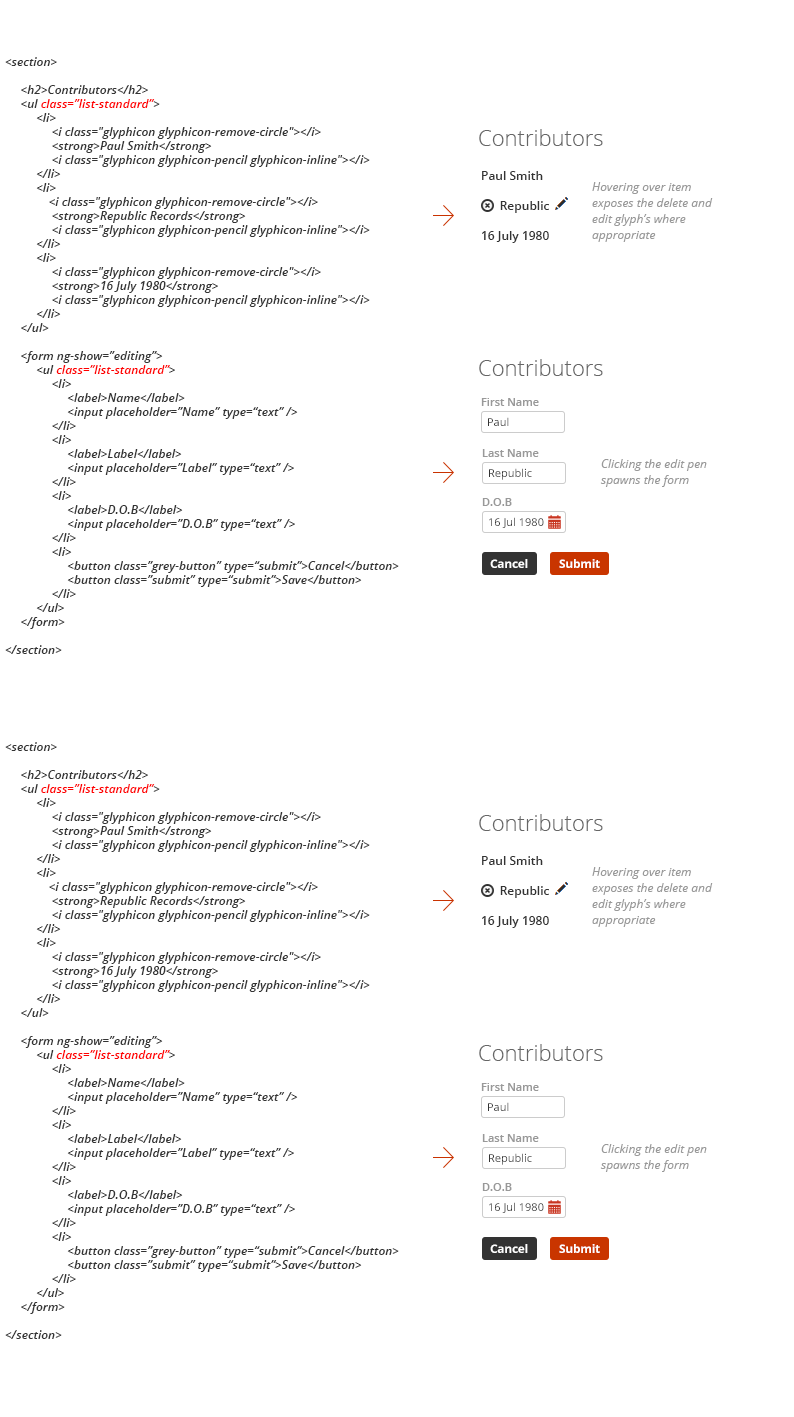
<style>
.page{position:relative;width:794px;height:1417px;background:#ffffff}
.page>*{position:absolute;margin:0}
.t1{font:12px/14px "OpenSans-SemiboldItalic";color:#333333}
.t2{font:12px/14px "OpenSans-SemiboldItalic";color:#ff0000}
.t3{font:22px "OpenSans-Light";color:#666666}
.t4{font:12px/10px "OpenSans-Semibold";color:#333333}
.t5{font:12px/16px "OpenSans-Italic";color:#999999}
.t6{font:11px "OpenSans-Semibold";color:#999999}
.t7{font:11px "OpenSans";color:#333333}
.t8{font:12px "OpenSans-Bold";letter-spacing:-0.025em;color:#ffffff}
</style>
<div class="page">
<p class="t1" style="left:5px;top:57px;width:394px;height:597px">&lt;section&gt;<br><br>     &lt;h2&gt;Contributors&lt;/h2&gt;<br>     &lt;ul <span class="t2">class=”list-standard”</span>&gt;<br>          &lt;li&gt;<br>               &lt;i class="glyphicon glyphicon-remove-circle"&gt;&lt;/i&gt;<br>               &lt;strong&gt;Paul Smith&lt;/strong&gt;<br>               &lt;i class="glyphicon glyphicon-pencil glyphicon-inline"&gt;&lt;/i&gt;<br>          &lt;/li&gt;<br>          &lt;li&gt;<br>              &lt;i class="glyphicon glyphicon-remove-circle"&gt;&lt;/i&gt;<br>               &lt;strong&gt;Republic Records&lt;/strong&gt;<br>               &lt;i class="glyphicon glyphicon-pencil glyphicon-inline"&gt;&lt;/i&gt;<br>          &lt;/li&gt;<br>          &lt;li&gt;<br>               &lt;i class="glyphicon glyphicon-remove-circle"&gt;&lt;/i&gt;<br>               &lt;strong&gt;16 July 1980&lt;/strong&gt;<br>               &lt;i class="glyphicon glyphicon-pencil glyphicon-inline"&gt;&lt;/i&gt;<br>          &lt;/li&gt;<br>     &lt;/ul&gt;<br><br>     &lt;form ng-show=”editing”&gt;<br>          &lt;ul <span class="t2">class=”list-standard”</span>&gt;<br>               &lt;li&gt;<br>                    &lt;label&gt;Name&lt;/label&gt;<br>                    &lt;input placeholder=”Name” type=“text” /&gt;<br>               &lt;/li&gt;<br>               &lt;li&gt;<br>                    &lt;label&gt;Label&lt;/label&gt;<br>                    &lt;input placeholder=”Label” type=“text” /&gt;<br>               &lt;/li&gt;<br>               &lt;li&gt;<br>                    &lt;label&gt;D.O.B&lt;/label&gt;<br>                    &lt;input placeholder=”D.O.B” type=“text” /&gt;<br>               &lt;/li&gt;<br>               &lt;li&gt;<br>                    &lt;button class=”grey-button” type=“submit”&gt;Cancel&lt;/button&gt;<br>                    &lt;button class=”submit” type=“submit”&gt;Save&lt;/button&gt;<br>               &lt;/li&gt;<br>          &lt;/ul&gt;<br>     &lt;/form&gt;<br><br>&lt;/section&gt;</p>
<p class="t3" style="left:479px;top:129px;width:124px;height:17px">Contributors</p>
<p class="t4" style="left:482px;top:171px;width:67px;height:72px">Paul Smith<br><br><br>      Republic<br><br><br>16 July 1980</p>
<p class="t5" style="left:592px;top:182px;width:121px;height:60px">Hovering over item<br>exposes the delete and <br>edit glyph’s where<br>appropriate</p>
<p class="t3" style="left:479px;top:359px;width:124px;height:17px">Contributors</p>
<p class="t6" style="left:481px;top:398px;width:58px;height:8px">First Name</p>
<p class="t7" style="left:488px;top:417px;width:21px;height:9px">Paul</p>
<p class="t6" style="left:482px;top:449px;width:57px;height:8px">Last Name</p>
<p class="t5" style="left:600px;top:459px;width:107px;height:28px">Clicking the edit pen <br>spawns the form</p>
<p class="t7" style="left:489px;top:468px;width:43px;height:12px">Republic</p>
<p class="t6" style="left:482px;top:498px;width:30px;height:8px">D.O.B</p>
<p class="t7" style="left:489px;top:517px;width:55px;height:11px">16 Jul 1980</p>
<p class="t8" style="left:490px;top:559px;width:38px;height:9px">Cancel</p>
<p class="t8" style="left:559px;top:559px;width:41px;height:9px">Submit</p>
<p class="t1" style="left:5px;top:742px;width:394px;height:597px">&lt;section&gt;<br><br>     &lt;h2&gt;Contributors&lt;/h2&gt;<br>     &lt;ul <span class="t2">class=”list-standard”</span>&gt;<br>          &lt;li&gt;<br>               &lt;i class="glyphicon glyphicon-remove-circle"&gt;&lt;/i&gt;<br>               &lt;strong&gt;Paul Smith&lt;/strong&gt;<br>               &lt;i class="glyphicon glyphicon-pencil glyphicon-inline"&gt;&lt;/i&gt;<br>          &lt;/li&gt;<br>          &lt;li&gt;<br>              &lt;i class="glyphicon glyphicon-remove-circle"&gt;&lt;/i&gt;<br>               &lt;strong&gt;Republic Records&lt;/strong&gt;<br>               &lt;i class="glyphicon glyphicon-pencil glyphicon-inline"&gt;&lt;/i&gt;<br>          &lt;/li&gt;<br>          &lt;li&gt;<br>               &lt;i class="glyphicon glyphicon-remove-circle"&gt;&lt;/i&gt;<br>               &lt;strong&gt;16 July 1980&lt;/strong&gt;<br>               &lt;i class="glyphicon glyphicon-pencil glyphicon-inline"&gt;&lt;/i&gt;<br>          &lt;/li&gt;<br>     &lt;/ul&gt;<br><br>     &lt;form ng-show=”editing”&gt;<br>          &lt;ul <span class="t2">class=”list-standard”</span>&gt;<br>               &lt;li&gt;<br>                    &lt;label&gt;Name&lt;/label&gt;<br>                    &lt;input placeholder=”Name” type=“text” /&gt;<br>               &lt;/li&gt;<br>               &lt;li&gt;<br>                    &lt;label&gt;Label&lt;/label&gt;<br>                    &lt;input placeholder=”Label” type=“text” /&gt;<br>               &lt;/li&gt;<br>               &lt;li&gt;<br>                    &lt;label&gt;D.O.B&lt;/label&gt;<br>                    &lt;input placeholder=”D.O.B” type=“text” /&gt;<br>               &lt;/li&gt;<br>               &lt;li&gt;<br>                    &lt;button class=”grey-button” type=“submit”&gt;Cancel&lt;/button&gt;<br>                    &lt;button class=”submit” type=“submit”&gt;Save&lt;/button&gt;<br>               &lt;/li&gt;<br>          &lt;/ul&gt;<br>     &lt;/form&gt;<br><br>&lt;/section&gt;</p>
<p class="t3" style="left:479px;top:814px;width:124px;height:17px">Contributors</p>
<p class="t4" style="left:482px;top:856px;width:67px;height:72px">Paul Smith<br><br><br>      Republic<br><br><br>16 July 1980</p>
<p class="t5" style="left:592px;top:867px;width:121px;height:60px">Hovering over item<br>exposes the delete and <br>edit glyph’s where<br>appropriate</p>
<p class="t3" style="left:479px;top:1044px;width:124px;height:17px">Contributors</p>
<p class="t6" style="left:481px;top:1083px;width:58px;height:8px">First Name</p>
<p class="t7" style="left:488px;top:1102px;width:21px;height:9px">Paul</p>
<p class="t6" style="left:482px;top:1134px;width:57px;height:8px">Last Name</p>
<p class="t5" style="left:600px;top:1144px;width:107px;height:28px">Clicking the edit pen <br>spawns the form</p>
<p class="t7" style="left:489px;top:1153px;width:43px;height:12px">Republic</p>
<p class="t6" style="left:482px;top:1183px;width:30px;height:8px">D.O.B</p>
<p class="t7" style="left:489px;top:1202px;width:55px;height:11px">16 Jul 1980</p>
<p class="t8" style="left:490px;top:1244px;width:38px;height:9px">Cancel</p>
<p class="t8" style="left:559px;top:1244px;width:41px;height:9px">Submit</p>
</div>
